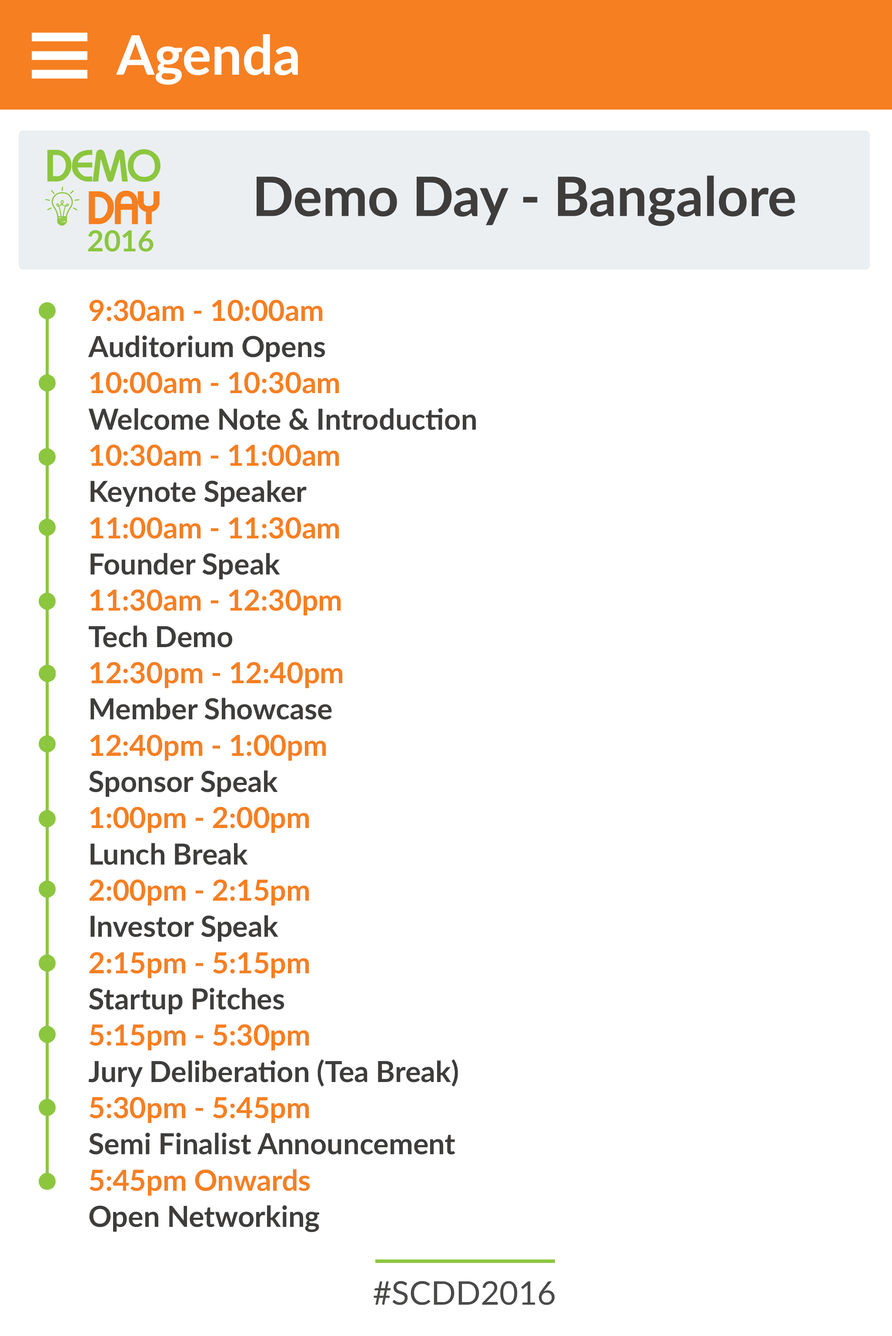
<style>
.page{position:relative;width:892px;height:1336px;background:#ffffff}
.page>*{position:absolute;margin:0}
.t1{font:54.4px "Lato-Bold";color:#ffffff}
.t2{font:54.4px "Lato-Bold";color:#3e3d3c}
.t3{font:29px/36.3px "Lato-Bold";color:#3e3d3c}
.t4{font:29px/36.3px "Lato-Bold";color:#f67f21}
.t5{font:32.6px "Lato-Regular";color:#4a4b49}
</style>
<div class="page">
<p class="t1" style="left:116px;top:34px;width:182px;height:51px">Agenda</p>
<p class="t2" style="left:257px;top:175px;width:538px;height:51px">Demo Day - Bangalore</p>
<p class="t3" style="left:88px;top:300px;width:388px;height:932px"><span class="t4">9:30am - 10:00am<br></span>Auditorium Opens<br><span class="t4">10:00am - 10:30am<br></span>Welcome Note &amp; Introduction<br><span class="t4">10:30am - 11:00am<br></span>Keynote Speaker<br><span class="t4">11:00am - 11:30am<br></span>Founder Speak<br><span class="t4">11:30am - 12:30pm<br></span>Tech Demo<br><span class="t4">12:30pm - 12:40pm<br></span>Member Showcase<br><span class="t4">12:40pm - 1:00pm<br></span>Sponsor Speak<br><span class="t4">1:00pm - 2:00pm<br></span>Lunch Break<br><span class="t4">2:00pm - 2:15pm<br></span>Investor Speak<br><span class="t4">2:15pm - 5:15pm<br></span>Startup Pitches<br><span class="t4">5:15pm - 5:30pm<br></span>Jury Deliberation (Tea Break)<br><span class="t4">5:30pm - 5:45pm<br></span>Semi Finalist Announcement<br><span class="t4">5:45pm Onwards<br></span>Open Networking</p>
<p class="t5" style="left:374px;top:1281px;width:181px;height:25px">#SCDD2016</p>
</div>
